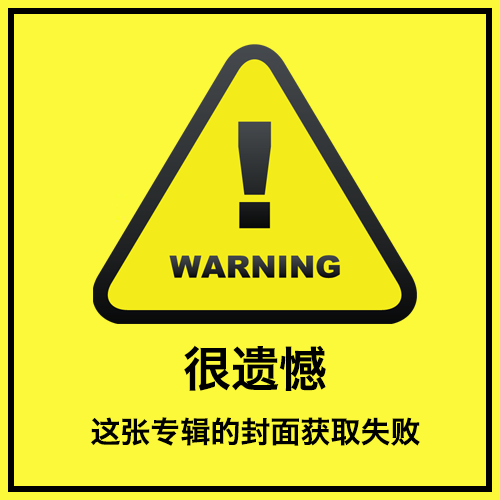
<style>
.page{position:relative;width:500px;height:500px;background:#fcf93a}
.page>*{position:absolute;margin:0}
.t1{font:48px "HiraginoSansGB-W6";color:#000000}
.t2{font:30px "HiraginoSansGB-W6";color:#000000}
</style>
<div class="page">
<p class="t1" style="left:184px;top:345px;width:142px;height:46px">很遗憾</p>
<p class="t2" style="left:91px;top:417px;width:329px;height:29px">这张专辑的封面获取失败</p>
</div>
